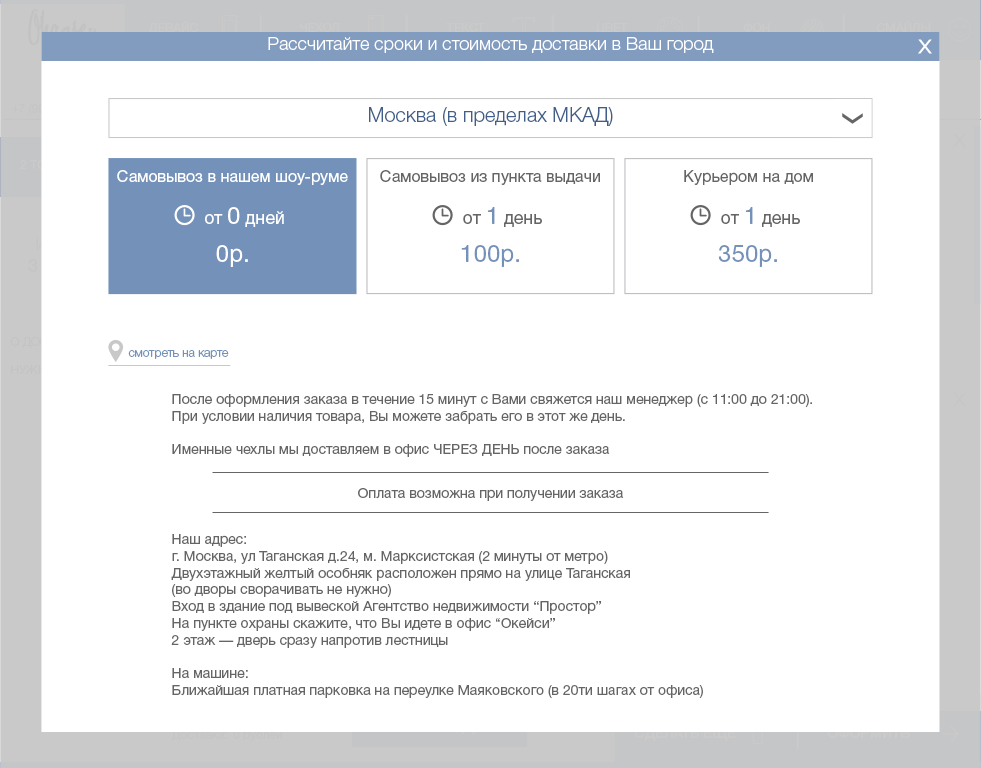
<style>
.page{position:relative;width:981px;height:768px;background:#ffffff}
.page>*{position:absolute;margin:0}
.t1{font:12px "HelveticaNeueCyr-Roman";color:#cacaca}
.t2{font:18px "HelveticaNeueCyr-Light";color:#ffffff}
.t3{font:20px "HelveticaNeueCyr-Light";color:#405e88}
.t4{font:16px "HelveticaNeueCyr-Roman";color:#ffffff}
.t5{font:16px "HelveticaNeueCyr-Roman";color:#656565}
.t6{font:17.7px "HelveticaNeueCyr-Roman";color:#ffffff}
.t7{font:23.6px "HelveticaNeueCyr-Roman";color:#ffffff}
.t8{font:17.7px "HelveticaNeueCyr-Roman";color:#656565}
.t9{font:23.6px "HelveticaNeueCyr-Roman";color:#7491b9}
.t10{font:24px "HelveticaNeueCyr-Roman";color:#ffffff}
.t11{font:24px "HelveticaNeueCyr-Roman";color:#7491b9}
.t12{font:12px "HelveticaNeueCyr-Light";color:#7491b9}
.t13{font:14px "HelveticaNeueCyr-Roman";color:#656565}
.t14{font:12px "HelveticaNeueCyr-Roman";color:#c5c5c5}
</style>
<div class="page">
<p class="t1" style="left:149px;top:21px;width:49px;height:13px">ДЕВАЙС</p>
<p class="t1" style="left:300px;top:23px;width:39px;height:10px">ЧЕХОЛ</p>
<p class="t1" style="left:446px;top:23px;width:39px;height:9px">ТЕКСТ</p>
<p class="t1" style="left:597px;top:23px;width:31px;height:11px">ЦВЕТ</p>
<p class="t1" style="left:743px;top:23px;width:27px;height:9px">ФОН</p>
<p class="t1" style="left:877px;top:21px;width:53px;height:12px">СМАЙЛЫ</p>
<p class="t2" style="left:268px;top:37px;width:446px;height:16px">Рассчитайте сроки и стоимость доставки в Ваш город</p>
<p class="t3" style="left:369px;top:107px;width:244px;height:19px">Москва (в пределах МКАД)</p>
<p class="t4" style="left:117px;top:170px;width:231px;height:15px">Самовывоз в нашем шоу-руме</p>
<p class="t5" style="left:380px;top:170px;width:220px;height:15px">Самовывоз из пункта выдачи</p>
<p class="t5" style="left:684px;top:170px;width:129px;height:15px">Курьером на дом</p>
<p class="t6" style="left:205px;top:207px;width:79px;height:20px">от <span class="t7">0</span> дней</p>
<p class="t8" style="left:463px;top:207px;width:79px;height:20px">от <span class="t9">1</span> день</p>
<p class="t8" style="left:721px;top:207px;width:79px;height:20px">от <span class="t9">1</span> день</p>
<p class="t10" style="left:216px;top:245px;width:32px;height:22px">0р.</p>
<p class="t11" style="left:461px;top:245px;width:58px;height:22px">100р.</p>
<p class="t11" style="left:718px;top:245px;width:59px;height:22px">350р.</p>
<p class="t12" style="left:128px;top:350px;width:101px;height:9px">смотреть на карте</p>
<p class="t13" style="left:172px;top:394px;width:640px;height:63px">После оформления заказа в течение 15 минут с Вами свяжется наш менеджер (с 11:00 до 21:00).<br>При условии наличия товара, Вы можете забрать его в этот же день.<br><br>Именные чехлы мы доставляем в офис ЧЕРЕЗ ДЕНЬ после заказа</p>
<p class="t13" style="left:358px;top:488px;width:266px;height:13px">Оплата возможна при получении заказа</p>
<p class="t13" style="left:171px;top:534px;width:532px;height:165px">Наш адрес:<br>г. Москва, ул Таганская д.24, м. Марксистская (2 минуты от метро)<br>Двухэтажный желтый особняк расположен прямо на улице Таганская<br>(во дворы сворачивать не нужно)<br>Вход в здание под вывеской Агентство недвижимости “Простор”<br>На пункте охраны скажите, что Вы идете в офис “Окейси”<br>2 этаж — дверь сразу напротив лестницы<br><br>На машине:<br>Ближайшая платная парковка на переулке Маяковского (в 20ти шагах от офиса)</p>
<p class="t14" style="left:171px;top:730px;width:56px;height:11px">Доставка:</p>
</div>
